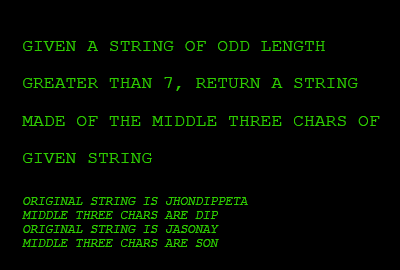
<style>
.page{position:relative;width:400px;height:270px;background:#000000}
.page>*{position:absolute;margin:0}
.t1{font:12.5px/13.9px "CourierNewPSMT";color:#30cc00;text-transform:uppercase;font-style:italic}
.t2{font:18.1px/37.5px "CourierNewPSMT";color:#30cc00;text-transform:uppercase}
</style>
<div class="page">
<p class="t1" style="left:22px;top:41px;width:358px;height:206px"><span class="t2">given a string of odd length <br>greater than 7, return a string<br>made of the middle three chars of<br>given string<br></span><br><br>original string is jhondippeta<br>middle three chars are dip<br>original string is jasonay<br>middle three chars are son</p>
</div>
